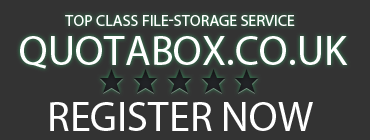
<style>
.page{position:relative;width:370px;height:140px;background:#333333}
.page>*{position:absolute;margin:0}
.t1{font:16px "MyriadPro-Regular";color:#ffffff;text-transform:uppercase}
.t2{font:42px "MyriadPro-Regular";color:#ffffff;text-transform:uppercase}
</style>
<div class="page">
<p class="t1" style="left:65px;top:15px;width:230px;height:11px">top class file-storage service</p>
<p class="t2" style="left:20px;top:36px;width:328px;height:33px">QUOTABOX.CO.UK</p>
<p class="t2" style="left:50px;top:102px;width:263px;height:29px">REGISTER NOW</p>
</div>
